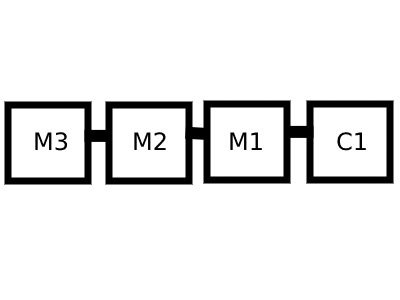
<style>
.page{position:relative;width:400px;height:300px;background:#ffffff}
.page>*{position:absolute;margin:0}
.t1{font:24px "DejaVuSans";color:#000000}
</style>
<div class="page">
<p class="t1" style="left:35px;top:132px;width:33px;height:19px">M3</p>
<p class="t1" style="left:134px;top:132px;width:32px;height:18px">M2</p>
<p class="t1" style="left:230px;top:132px;width:32px;height:18px">M1</p>
<p class="t1" style="left:337px;top:132px;width:29px;height:19px">C1</p>
</div>
